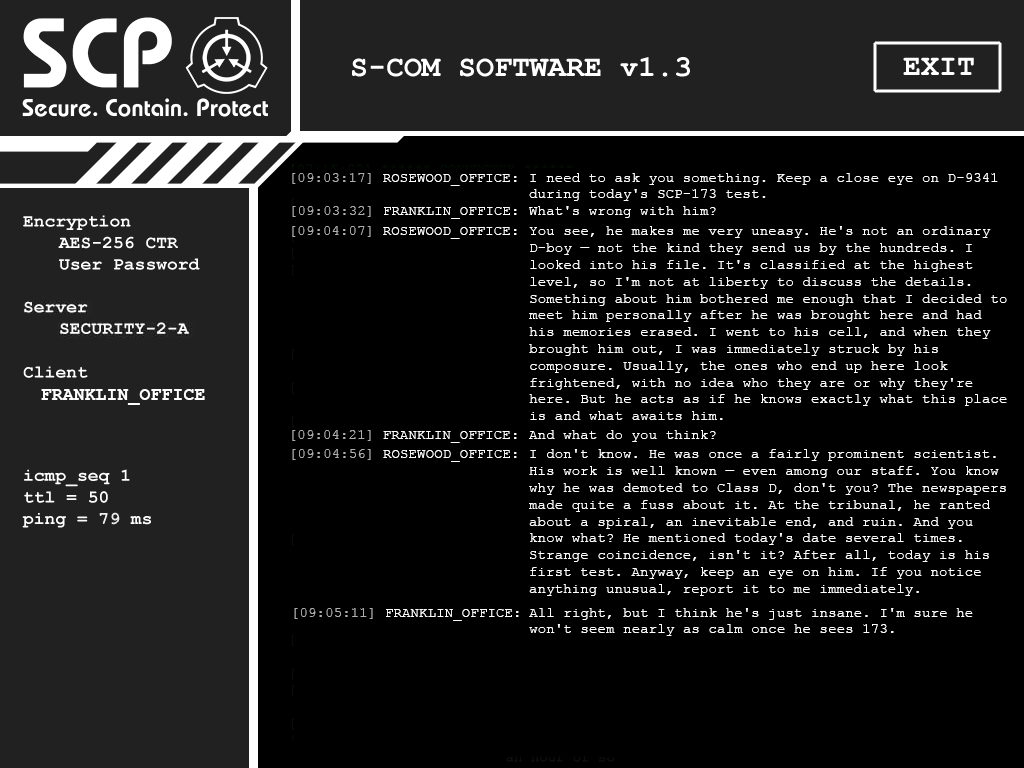
<style>
.page{position:relative;width:1024px;height:768px;background:#000000}
.page>*{position:absolute;margin:0}
.t1{font:14px "CourierNewPSMT";letter-spacing:0.01em;color:#ffffff;text-transform:uppercase}
.t2{font:14px "CourierNewPSMT";letter-spacing:0.01em;color:#aeacac}
.t3{font:14px "CourierNewPSMT";letter-spacing:0.01em;color:#ffffff}
.t4{font:14px "CourierNewPSMT";letter-spacing:0.01em;color:#afaeae}
.t5{font:18px "CourierNewPS-BoldMT";letter-spacing:0.01em;color:#ffffff;text-transform:uppercase}
.t6{font:14px "CourierNewPSMT";letter-spacing:0.01em;color:#b1b0b0}
</style>
<div class="page">
<p class="t1" style="left:292px;top:173px;width:225px;height:13px"><span class="t2">[09:03:17] </span>Rosewood_office:</p>
<p class="t3" style="left:529px;top:173px;width:469px;height:28px">I need to ask you something. Keep a close eye on D-9341 during today's SCP-173 test.</p>
<p class="t3" style="left:292px;top:206px;width:225px;height:13px"><span class="t2">[09:03:32]</span> FRANKLIN_OFFICE:</p>
<p class="t3" style="left:529px;top:206px;width:187px;height:12px">What's wrong with him?</p>
<p class="t1" style="left:292px;top:226px;width:225px;height:13px"><span class="t4">[09:04:07] </span>Rosewood_office:</p>
<p class="t3" style="left:529px;top:226px;width:478px;height:194px">You see, he makes me very uneasy. He's not an ordinary D-boy — not the kind they send us by the hundreds. I looked into his file. It's classified at the highest level, so I'm not at liberty to discuss the details. Something about him bothered me enough that I decided to meet him personally after he was brought here and had his memories erased. I went to his cell, and when they brought him out, I was immediately struck by his composure. Usually, the ones who end up here look frightened, with no idea who they are or why they're here. But he acts as if he knows exactly what this place is and what awaits him.</p>
<p class="t5" style="left:41px;top:389px;width:164px;height:16px">Franklin_OFFICE</p>
<p class="t3" style="left:292px;top:430px;width:225px;height:13px"><span class="t4">[09:04:21]</span> FRANKLIN_OFFICE:</p>
<p class="t3" style="left:529px;top:430px;width:187px;height:12px">And what do you think?</p>
<p class="t1" style="left:292px;top:449px;width:225px;height:13px"><span class="t4">[09:04:56] </span>Rosewood_office:</p>
<p class="t3" style="left:529px;top:449px;width:477px;height:147px">I don't know. He was once a fairly prominent scientist. His work is well known — even among our staff. You know why he was demoted to Class D, don't you? The newspapers made quite a fuss about it. At the tribunal, he ranted about a spiral, an inevitable end, and ruin. And you know what? He mentioned today's date several times. Strange coincidence, isn't it? After all, today is his first test. Anyway, keep an eye on him. If you notice anything unusual, report it to me immediately.</p>
<p class="t3" style="left:294px;top:608px;width:225px;height:13px"><span class="t6">[09:05:11]</span> FRANKLIN_OFFICE:</p>
<p class="t3" style="left:529px;top:608px;width:444px;height:28px">All right, but I think he's just insane. I'm sure he won't seem nearly as calm once he sees 173.</p>
</div>
